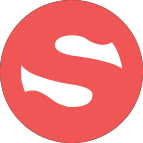
<style>
.page{position:relative;width:143px;height:143px;background:#f15656}
.page>*{position:absolute;margin:0}
.t1{font:169.6px "FredokaOne-Regular";color:#f15656;font-variant:small-caps;font-weight:bold;scale:1.36 1}
</style>
<div class="page">
<p class="t1" style="left:10px;top:6px;width:125px;height:130px">S</p>
</div>
